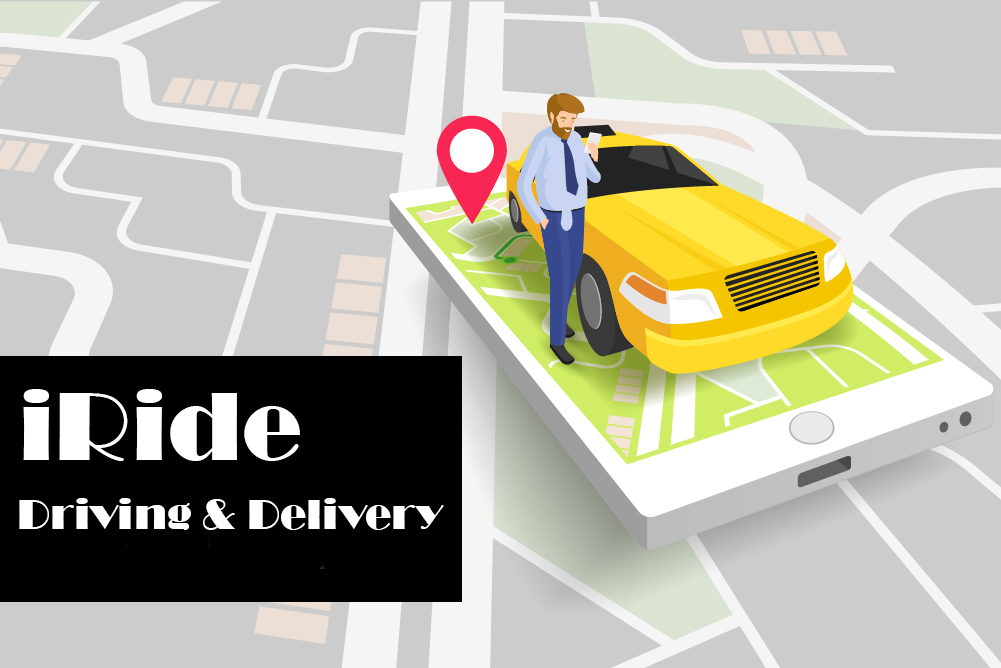
<style>
.page{position:relative;width:1001px;height:668px;background:#cccccc}
.page>*{position:absolute;margin:0}
.t1{font:100px "Broadway";color:#ffffff}
.t2{font:44px "Broadway";color:#ffffff}
</style>
<div class="page">
<p class="t1" style="left:23px;top:389px;width:277px;height:72px">iRide</p>
<p class="t2" style="left:19px;top:498px;width:425px;height:32px">Driving &amp; Delivery</p>
</div>
